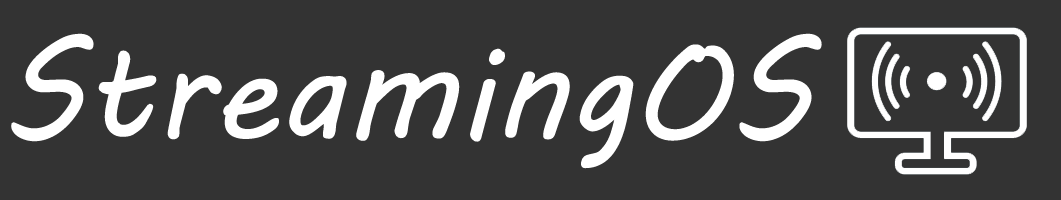
<style>
.page{position:relative;width:1061px;height:200px;background:#333333}
.page>*{position:absolute;margin:0}
.t1{font:135px "MVBoli";color:#ffffff}
</style>
<div class="page">
<p class="t1" style="left:11px;top:33px;width:811px;height:136px">StreamingOS</p>
</div>
